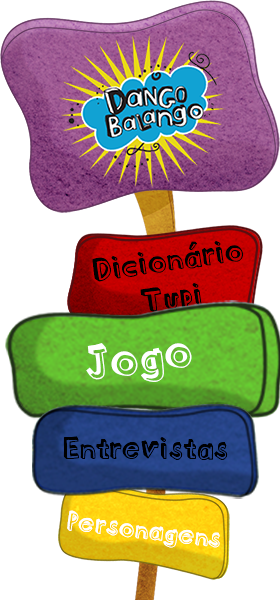
<style>
.page{position:relative;width:280px;height:600px;background:#ffffff}
.page>*{position:absolute;margin:0}
.t1{font:31.4px "BlockheadDarkSide";color:#010101}
.t2{font:53.8px "BlockheadDarkSide";color:#010101}
.t3{font:53.8px "BlockheadDarkSide";color:#3a52a3}
.t4{font:47.3px "BlockheadDarkSide";color:#ffffff}
.t5{font:30.1px "BlockheadDarkSide";color:#000000}
.t6{font:26.2px "BlockheadDarkSide";color:#ffffff}
</style>
<div class="page">
<p class="t1" style="left:92px;top:241px;width:151px;height:74px;rotate:-8deg"><span class="t2"><br></span>Dicionário<br>                 Tupi</p>
<p class="t1" style="left:92px;top:241px;width:151px;height:74px;rotate:-8deg"><span class="t3"><br></span>Dicionário<br>                 Tupi</p>
<p class="t4" style="left:86px;top:343px;width:106px;height:39px;rotate:-8deg">Jogo</p>
<p class="t4" style="left:86px;top:343px;width:106px;height:39px;rotate:-8deg">Jogo</p>
<p class="t5" style="left:63px;top:436px;width:165px;height:24px">Entrevistas</p>
<p class="t5" style="left:63px;top:436px;width:165px;height:24px">Entrevistas</p>
<p class="t6" style="left:67px;top:510px;width:153px;height:38px;rotate:7deg">Personagens</p>
<p class="t6" style="left:67px;top:510px;width:153px;height:38px;rotate:7deg">Personagens</p>
</div>
